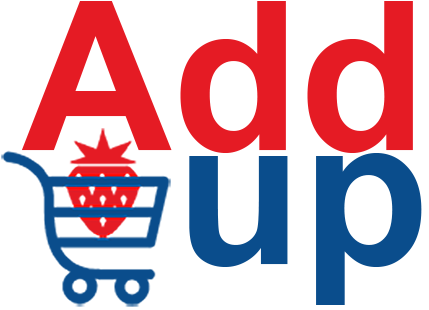
<style>
.page{position:relative;width:429px;height:310px;background:#ffffff}
.page>*{position:absolute;margin:0}
.t1{font:208.3px "Arial-BoldMT";color:#e51b24}
.t2{font:208.3px "Arial-BoldMT";color:#0a4d8c}
</style>
<div class="page">
<p class="t1" style="left:21px;top:1px;width:392px;height:152px">Add</p>
<p class="t2" style="left:189px;top:153px;width:233px;height:152px">up</p>
</div>
